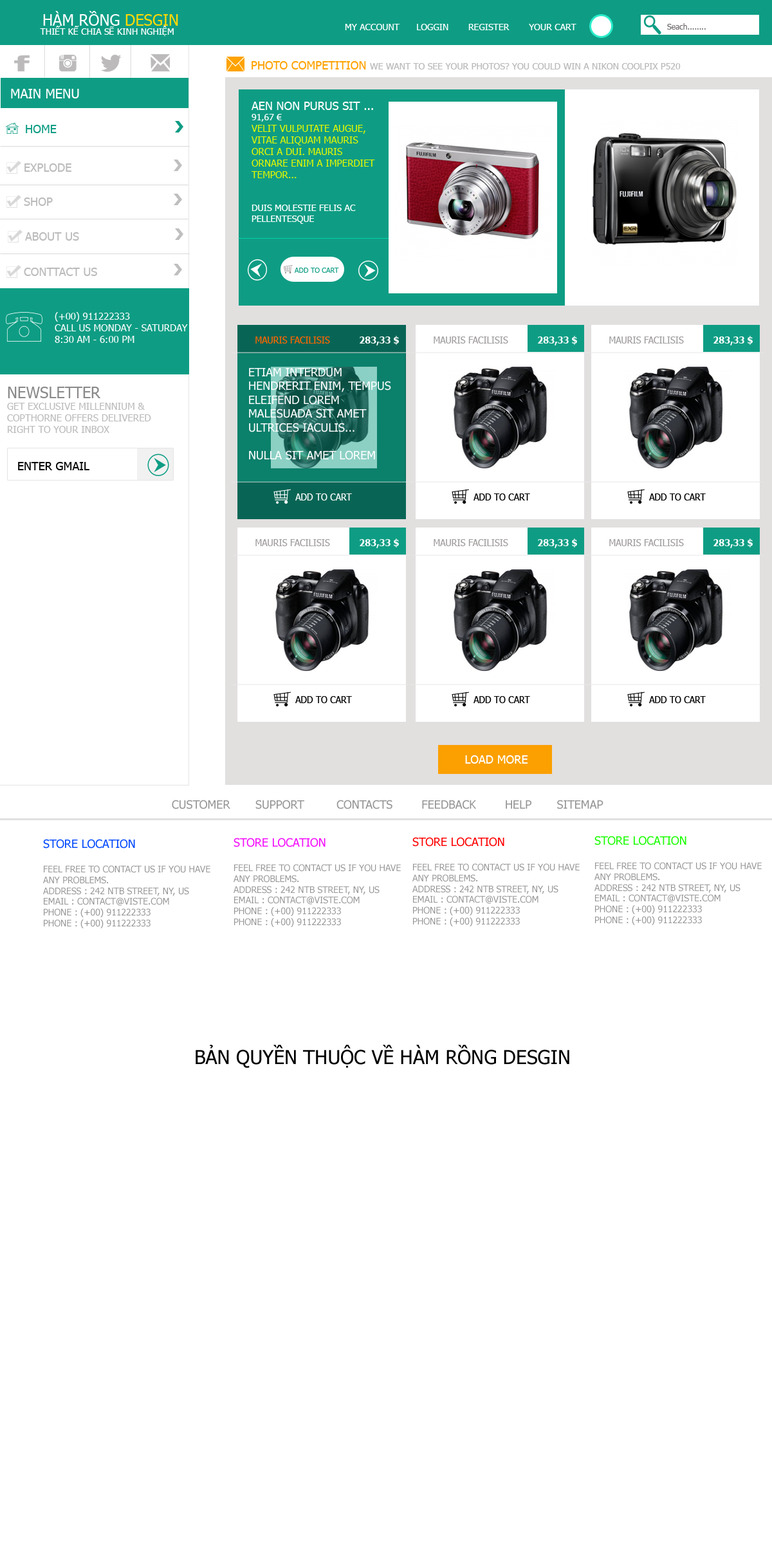
<style>
.page{position:relative;width:772px;height:1544px;background:#ffffff}
.page>*{position:absolute;margin:0}
.t1{font:15.4px "Tahoma";color:#ffffff;text-transform:uppercase}
.t2{font:15.4px "Tahoma";color:#ffd904;text-transform:uppercase}
.t3{font:9px "Tahoma";color:#ffffff;text-transform:uppercase}
.t4{font:7.7px "Tahoma";color:#6d6969}
.t5{font:7.7px "Tahoma";color:#6d6969;text-transform:uppercase}
.t6{font:9px "Tahoma";color:#bcbaba;text-transform:uppercase}
.t7{font:11.6px "Tahoma";color:#ffa200;text-transform:uppercase}
.t8{font:11.6px "Tahoma";color:#bcbaba;text-transform:uppercase}
.t9{font:12.9px "Tahoma";color:#ffffff;text-transform:uppercase}
.t10{font:9.7px "Tahoma";color:#e3f701;text-transform:uppercase}
.t11{font:11.6px "Tahoma";color:#ffffff;text-transform:uppercase}
.t12{font:11.6px "Tahoma";color:#0e9d84;text-transform:uppercase}
.t13{font:7.1px "Tahoma";color:#0e9d84;text-transform:uppercase}
.t14{font:9.7px "Tahoma";color:#ffffff;text-transform:uppercase}
.t15{font:9.7px "Tahoma";color:#fe6600;text-transform:uppercase;scale:0.94 1}
.t16{font:9.7px "Tahoma-Bold";color:#ffffff;text-transform:uppercase;scale:0.94 1}
.t17{font:9.7px "Tahoma";color:#a29e9e;text-transform:uppercase;scale:0.94 1}
.t18{font:9.7px "Tahoma";color:#bcbaba;text-transform:uppercase}
.t19{font:15.4px "Tahoma";color:#8b8989;text-transform:uppercase}
.t20{font:11.6px "Tahoma";color:#000000;text-transform:uppercase}
.t21{font:9.7px "Tahoma";color:#ffffff;text-transform:uppercase;scale:0.94 1}
.t22{font:9.7px "Tahoma";color:#000000;text-transform:uppercase;scale:0.94 1}
.t23{font:11.6px "Tahoma";color:#959595;text-transform:uppercase}
.t24{font:9px "Tahoma";color:#959595;text-transform:uppercase}
.t25{font:11.6px "Tahoma";color:#0048ff;text-transform:uppercase}
.t26{font:11.6px "Tahoma";color:#f40dfc;text-transform:uppercase}
.t27{font:11.6px "Tahoma";color:#ff0000;text-transform:uppercase}
.t28{font:11.6px "Tahoma";color:#1aff02;text-transform:uppercase}
.t29{font:19.3px "Tahoma";color:#000000;text-transform:uppercase}
</style>
<div class="page">
<p class="t1" style="left:43px;top:11px;width:135px;height:15px">hàm rồng <span class="t2">desgin</span></p>
<p class="t3" style="left:40px;top:26px;width:134px;height:10px">thiết kế chia sẽ kinh nghiệm</p>
<p class="t3" style="left:345px;top:24px;width:232px;height:6px">my account      loggin       register       your cart</p>
<p class="t4" style="left:667px;top:23px;width:39px;height:7px"><span class="t5">S</span>each........</p>
<p class="t6" style="left:252px;top:61px;width:429px;height:8px"><span class="t7">Photo Competition </span>We want to see your photos? You could win a Nikon Coolpix P520 <span class="t8">worth $499.95</span></p>
<p class="t9" style="left:11px;top:89px;width:68px;height:9px">main menu</p>
<p class="t10" style="left:251px;top:102px;width:124px;height:122px"><span class="t11">Aen non purus sit ...<br></span><span class="t3">91,67 €<br></span>Velit vulputate augue, vitae aliquam mauris orci a dui. Mauris ornare enim a imperdiet tempor...<br><span class="t3"><br><br>Duis molestie felis ac pellentesque<br>Sed pellentesque sapien et<br>Mauris est molestie nulla</span></p>
<p class="t12" style="left:26px;top:125px;width:31px;height:8px">home</p>
<p class="t8" style="left:24px;top:163px;width:47px;height:9px">explode</p>
<p class="t8" style="left:24px;top:198px;width:29px;height:8px">shop</p>
<p class="t8" style="left:25px;top:232px;width:54px;height:9px">about us</p>
<p class="t8" style="left:24px;top:268px;width:73px;height:8px">conttact us</p>
<p class="t13" style="left:295px;top:268px;width:44px;height:5px">add to cart</p>
<p class="t14" style="left:55px;top:312px;width:133px;height:31px">(+00) 911222333<br>Call us Monday - Saturday <br>8:30 am - 6:00 pm</p>
<p class="t15" style="left:255px;top:337px;width:75px;height:7px">Mauris facilisis eros</p>
<p class="t16" style="left:360px;top:336px;width:39px;height:10px">283,33 $</p>
<p class="t17" style="left:434px;top:337px;width:74px;height:7px">Mauris facilisis eros</p>
<p class="t16" style="left:538px;top:336px;width:39px;height:10px">283,33 $</p>
<p class="t17" style="left:609px;top:337px;width:75px;height:7px">Mauris facilisis eros</p>
<p class="t16" style="left:714px;top:336px;width:39px;height:10px">283,33 $</p>
<p class="t11" style="left:249px;top:368px;width:142px;height:92px">Etiam interdum hendrerit enim, tempus eleifend lorem malesuada sit amet ultrices iaculis...<br><br>Nulla sit amet lorem sit amet<br>Etiam cursus leo venenatis<br>Maecenas ut eleifend ...</p>
<p class="t18" style="left:7px;top:387px;width:144px;height:46px"><span class="t19">Newsletter<br></span>Get exclusive Millennium &amp; Copthorne offers delivered right to your inbox</p>
<p class="t20" style="left:18px;top:462px;width:71px;height:8px">enter gmail</p>
<p class="t21" style="left:295px;top:494px;width:57px;height:7px">add to cart</p>
<p class="t22" style="left:474px;top:494px;width:56px;height:7px">add to cart</p>
<p class="t22" style="left:649px;top:494px;width:57px;height:7px">add to cart</p>
<p class="t17" style="left:255px;top:539px;width:75px;height:7px">Mauris facilisis eros</p>
<p class="t16" style="left:360px;top:539px;width:39px;height:9px">283,33 $</p>
<p class="t17" style="left:434px;top:539px;width:74px;height:7px">Mauris facilisis eros</p>
<p class="t16" style="left:538px;top:539px;width:39px;height:9px">283,33 $</p>
<p class="t17" style="left:609px;top:539px;width:75px;height:7px">Mauris facilisis eros</p>
<p class="t16" style="left:714px;top:539px;width:39px;height:9px">283,33 $</p>
<p class="t22" style="left:295px;top:696px;width:57px;height:7px">add to cart</p>
<p class="t22" style="left:474px;top:696px;width:56px;height:7px">add to cart</p>
<p class="t22" style="left:649px;top:696px;width:57px;height:7px">add to cart</p>
<p class="t11" style="left:465px;top:755px;width:63px;height:9px">load more</p>
<p class="t23" style="left:172px;top:800px;width:432px;height:9px">Customer       Support         Contacts        Feedback        Help       Sitemap</p>
<p class="t24" style="left:43px;top:839px;width:167px;height:90px"><span class="t25">Store Location<br><br></span>Feel free to contact us if you have any problems.<br>Address : 242 NTB Street, NY, US<br>Email : contact@viste.com<br>Phone : (+00) 911222333<br>Phone : (+00) 911222333</p>
<p class="t24" style="left:234px;top:838px;width:167px;height:89px"><span class="t26">Store Location<br><br></span>Feel free to contact us if you have any problems.<br>Address : 242 NTB Street, NY, US<br>Email : contact@viste.com<br>Phone : (+00) 911222333<br>Phone : (+00) 911222333</p>
<p class="t24" style="left:412px;top:837px;width:168px;height:90px"><span class="t27">Store Location<br><br></span>Feel free to contact us if you have any problems.<br>Address : 242 NTB Street, NY, US<br>Email : contact@viste.com<br>Phone : (+00) 911222333<br>Phone : (+00) 911222333</p>
<p class="t24" style="left:595px;top:836px;width:167px;height:89px"><span class="t28">Store Location<br><br></span>Feel free to contact us if you have any problems.<br>Address : 242 NTB Street, NY, US<br>Email : contact@viste.com<br>Phone : (+00) 911222333<br>Phone : (+00) 911222333</p>
<p class="t29" style="left:196px;top:1045px;width:373px;height:23px">bản quyền thuộc về hàm rồng desgin</p>
</div>
